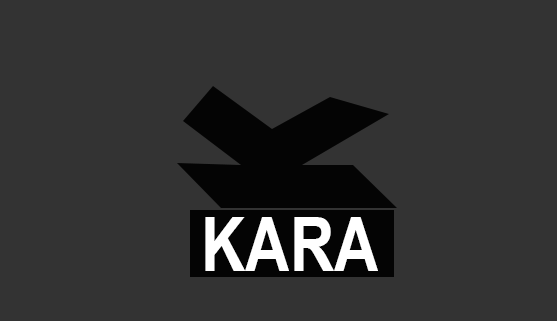
<style>
.page{position:relative;width:557px;height:321px;background:#333333}
.page>*{position:absolute;margin:0}
.t1{font:75px "ArialNarrow-Bold";color:#ffffff}
</style>
<div class="page">
<p class="t1" style="left:205px;top:217px;width:173px;height:54px">KARA</p>
</div>
